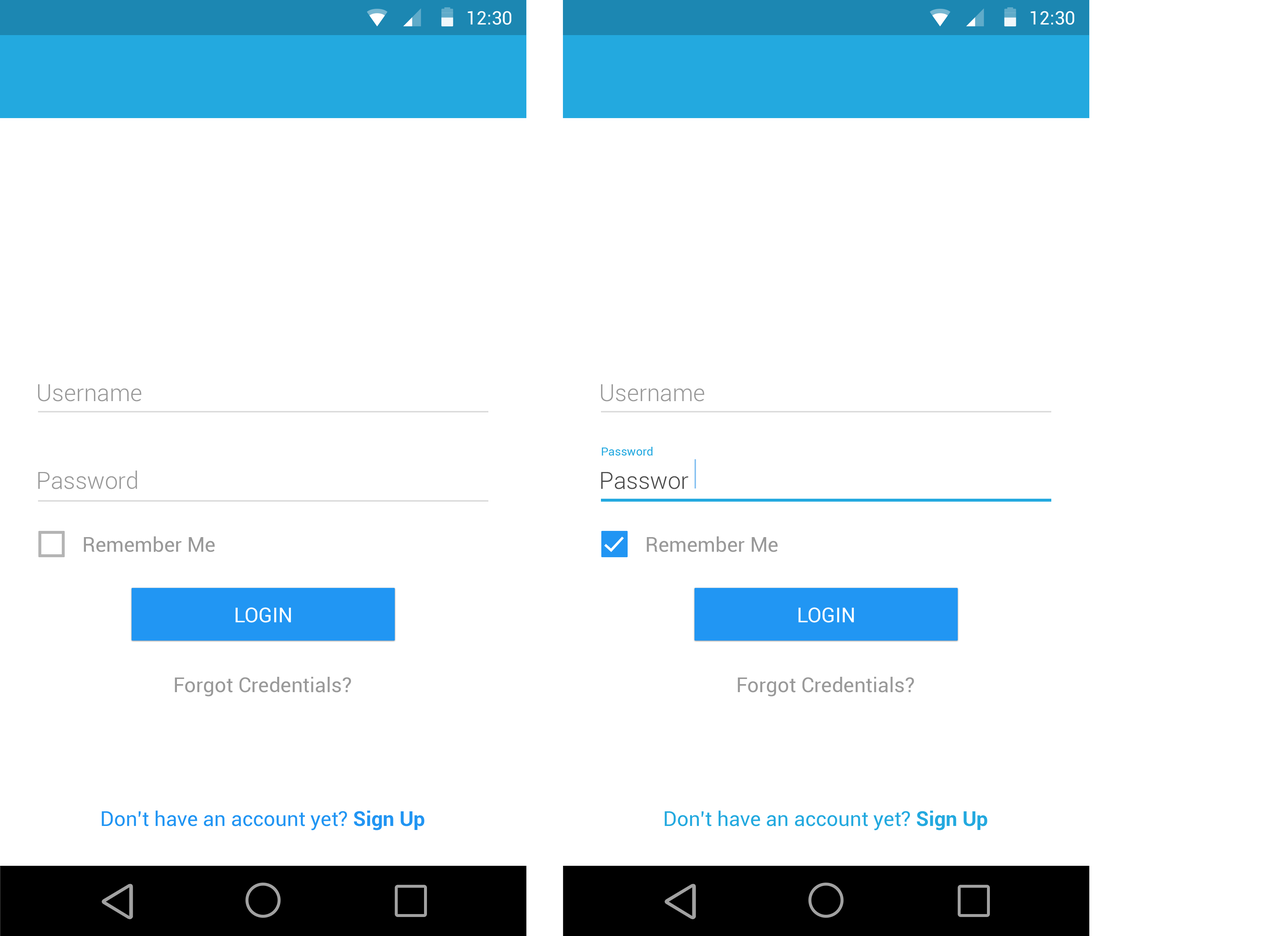
<style>
.page{position:relative;width:1275px;height:936px;background:#ffffff}
.page>*{position:absolute;margin:0}
.t1{font:18.5px "Roboto-Regular";color:#ffffff}
.t2{font:23.4px "Roboto-Light";color:#999999}
.t3{font:11.7px "Roboto-Regular";color:#24a9e0}
.t4{font:23.4px "Roboto-Light";color:#4d4d4d}
.t5{font:20.5px "Roboto-Regular";color:#999999}
.t6{font:20.5px "Roboto-Regular";color:#ffffff}
.t7{font:20.5px "Roboto-Regular";color:#2195f3}
.t8{font:20.5px "Roboto-Bold";color:#2195f3}
.t9{font:20.5px "Roboto-Regular";color:#23a9df}
.t10{font:20.5px "Roboto-Bold";color:#23a9df}
</style>
<div class="page">
<p class="t1" style="left:467px;top:11px;width:44px;height:14px">12:30</p>
<p class="t1" style="left:1030px;top:11px;width:44px;height:14px">12:30</p>
<p class="t2" style="left:38px;top:384px;width:103px;height:17px">Username</p>
<p class="t2" style="left:601px;top:384px;width:103px;height:17px">Username</p>
<p class="t3" style="left:602px;top:447px;width:50px;height:8px">Password</p>
<p class="t2" style="left:38px;top:470px;width:99px;height:19px">Password</p>
<p class="t4" style="left:601px;top:472px;width:87px;height:17px">Passwor</p>
<p class="t5" style="left:84px;top:536px;width:131px;height:16px">Remember Me</p>
<p class="t5" style="left:646px;top:536px;width:132px;height:16px">Remember Me</p>
<p class="t6" style="left:235px;top:607px;width:56px;height:15px">LOGIN</p>
<p class="t6" style="left:798px;top:607px;width:56px;height:15px">LOGIN</p>
<p class="t5" style="left:175px;top:676px;width:176px;height:20px">Forgot Credentials?</p>
<p class="t5" style="left:737px;top:676px;width:177px;height:20px">Forgot Credentials?</p>
<p class="t7" style="left:102px;top:810px;width:322px;height:20px">Don’t have an account yet? <span class="t8">Sign Up</span></p>
<p class="t9" style="left:664px;top:810px;width:323px;height:20px">Don’t have an account yet? <span class="t10">Sign Up</span></p>
</div>
